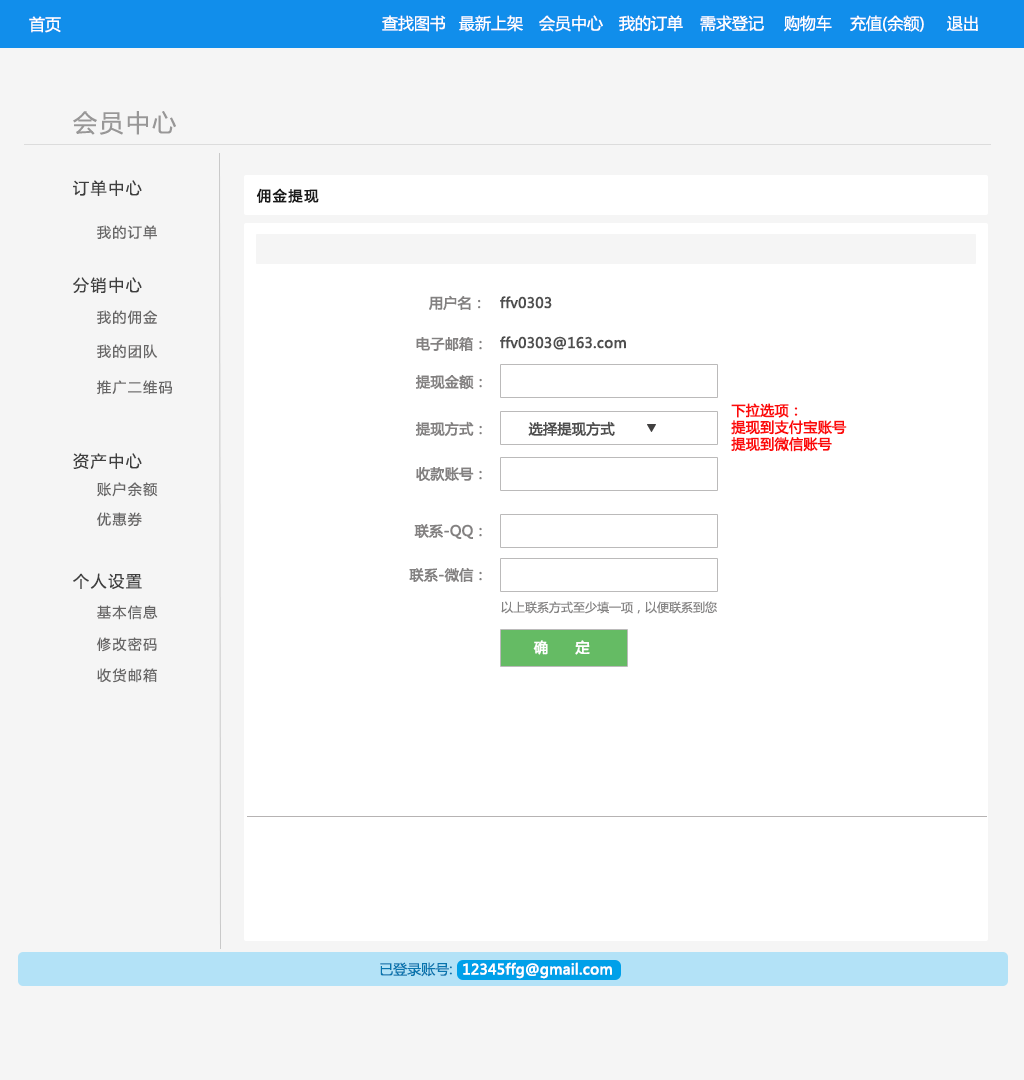
<style>
.page{position:relative;width:1024px;height:1080px;background:#ffffff}
.page>*{position:absolute;margin:0}
.t1{font:16px "MicrosoftYaHei";color:#ffffff}
.t2{font:24px "MicrosoftYaHei";letter-spacing:0.1em;color:#989797}
.t3{font:16px "MicrosoftYaHei";letter-spacing:0.1em;color:#3f3f3f}
.t4{font:14px "MicrosoftYaHei";letter-spacing:0.1em;font-weight:bold}
.t5{font:14px "MicrosoftYaHei";letter-spacing:0.1em;color:#1b1b1b;font-weight:bold}
.t6{font:14px "MicrosoftYaHei";letter-spacing:0.1em;color:#676666}
.t7{font:14px "MicrosoftYaHei";color:#838181;font-weight:bold}
.t8{font:14px "MicrosoftYaHei";color:#4f4f4f;font-weight:bold}
.t9{font:14px "MicrosoftYaHei";color:#fc0b0b;font-weight:bold}
.t10{font:12px "MicrosoftYaHei";color:#858484}
.t11{font:14px "MicrosoftYaHei";color:#fefefe;font-weight:bold}
.t12{font:14px "MicrosoftYaHei";color:#0875ae}
.t13{font:14px "MicrosoftYaHei";color:#ffffff;font-weight:bold}
</style>
<div class="page">
<p class="t1" style="left:29px;top:16px;width:32px;height:17px">首页</p>
<p class="t1" style="left:382px;top:15px;width:64px;height:17px">查找图书</p>
<p class="t1" style="left:459px;top:15px;width:64px;height:17px">最新上架</p>
<p class="t1" style="left:539px;top:15px;width:64px;height:17px">会员中心</p>
<p class="t1" style="left:619px;top:15px;width:64px;height:17px">我的订单</p>
<p class="t1" style="left:700px;top:15px;width:64px;height:17px">需求登记</p>
<p class="t1" style="left:784px;top:15px;width:48px;height:17px">购物车</p>
<p class="t1" style="left:850px;top:15px;width:74px;height:17px">充值(余额)</p>
<p class="t1" style="left:947px;top:15px;width:31px;height:16px">退出</p>
<p class="t2" style="left:73px;top:111px;width:103px;height:24px">会员中心</p>
<p class="t3" style="left:73px;top:180px;width:69px;height:16px">订单中心</p>
<p class="t4" style="left:256px;top:188px;width:149px;height:15px">我的佣金：￥150.00</p>
<p class="t5" style="left:256px;top:188px;width:63px;height:15px">佣金提现</p>
<p class="t6" style="left:97px;top:225px;width:60px;height:15px">我的订单</p>
<p class="t3" style="left:73px;top:277px;width:69px;height:16px">分销中心</p>
<p class="t7" style="left:429px;top:295px;width:52px;height:15px">用户名：</p>
<p class="t8" style="left:500px;top:296px;width:52px;height:13px">ffv0303</p>
<p class="t6" style="left:97px;top:310px;width:61px;height:15px">我的佣金</p>
<p class="t7" style="left:416px;top:337px;width:66px;height:14px">电子邮箱：</p>
<p class="t8" style="left:500px;top:336px;width:126px;height:14px">ffv0303@163.com</p>
<p class="t6" style="left:97px;top:344px;width:61px;height:15px">我的团队</p>
<p class="t7" style="left:416px;top:374px;width:66px;height:16px">提现金额：</p>
<p class="t6" style="left:97px;top:380px;width:75px;height:15px">推广二维码</p>
<p class="t9" style="left:731px;top:403px;width:116px;height:49px">下拉选项：<br>提现到支付宝账号<br>提现到微信账号</p>
<p class="t7" style="left:416px;top:421px;width:66px;height:16px">提现方式：</p>
<p class="t8" style="left:528px;top:421px;width:87px;height:16px">选择提现方式</p>
<p class="t3" style="left:73px;top:453px;width:69px;height:16px">资产中心</p>
<p class="t7" style="left:416px;top:467px;width:66px;height:14px">收款账号：</p>
<p class="t6" style="left:97px;top:482px;width:61px;height:15px">账户余额</p>
<p class="t6" style="left:97px;top:512px;width:45px;height:15px">优惠券</p>
<p class="t7" style="left:414px;top:524px;width:68px;height:15px">联系-QQ：</p>
<p class="t7" style="left:409px;top:567px;width:73px;height:15px">联系-微信：</p>
<p class="t3" style="left:73px;top:573px;width:69px;height:16px">个人设置</p>
<p class="t6" style="left:97px;top:605px;width:61px;height:15px">基本信息</p>
<p class="t10" style="left:501px;top:601px;width:216px;height:13px">以上联系方式至少填一项，以便联系到您</p>
<p class="t6" style="left:97px;top:637px;width:60px;height:15px">修改密码</p>
<p class="t11" style="left:533px;top:640px;width:57px;height:15px">确      定</p>
<p class="t6" style="left:97px;top:668px;width:60px;height:15px">收货邮箱</p>
<p class="t12" style="left:380px;top:962px;width:72px;height:15px">已登录账号:</p>
<p class="t13" style="left:463px;top:962px;width:149px;height:17px">12345ffg@gmail.com</p>
</div>
